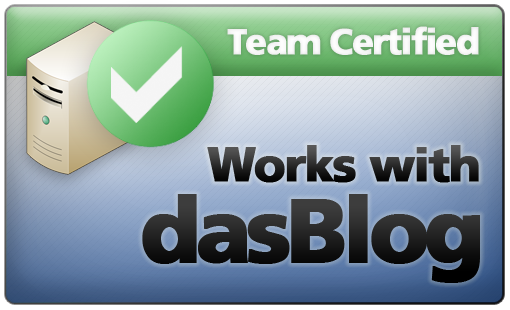
<style>
.page{position:relative;width:510px;height:310px}
.page>*{position:absolute;margin:0}
.t1{font:36px "Frutiger-Black";letter-spacing:-0.075em;color:#ffffff;font-weight:bold}
.t2{font:48px "Frutiger-Black";letter-spacing:-0.05em;font-weight:bold}
.t3{font:90px "Frutiger-Black";letter-spacing:-0.075em;font-weight:bold}
</style>
<div class="page">
<p class="t1" style="left:227px;top:26px;width:252px;height:29px">Team Certified</p>
<p class="t2" style="left:207px;top:145px;width:272px;height:38px">Works with</p>
<p class="t3" style="left:142px;top:194px;width:338px;height:89px">dasBlog</p>
</div>
